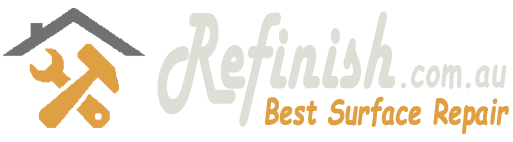
<style>
.page{position:relative;width:513px;height:142px;background:#ffffff}
.page>*{position:absolute;margin:0}
.t1{font:112.8px "HarlowSolid";color:#dfded6;font-weight:bold;scale:0.56 1}
.t2{font:40.7px "ComicSansMS-BoldItalic";color:#dfded6;font-weight:bold;scale:0.67 1}
.t3{font:34.4px "ComicSansMS-BoldItalic";color:#df9f43;font-weight:bold;scale:0.68 1}
</style>
<div class="page">
<p class="t1" style="left:157px;top:11px;width:238px;height:116px">Refinish</p>
<p class="t2" style="left:401px;top:64px;width:106px;height:25px">.com.au</p>
<p class="t3" style="left:265px;top:96px;width:244px;height:38px">Best Surface Repair</p>
</div>
